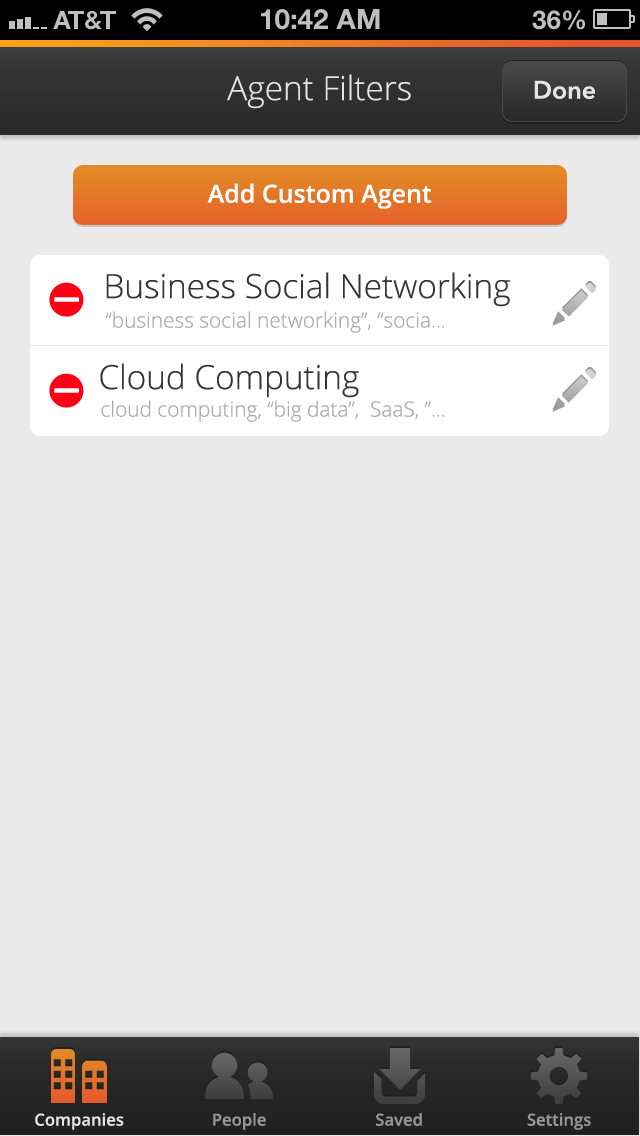
<style>
.page{position:relative;width:640px;height:1136px;background:#eaeaea}
.page>*{position:absolute;margin:0}
.t1{font:33.3px "OpenSans-Light";color:#e5e5e5}
.t2{font:25px "AvenirNext-DemiBold";color:#e5e5e5}
.t3{font:25px "OpenSans-Semibold";color:#ffffff}
.t4{font:33.3px "OpenSans-Light";color:#343434}
.t5{font:20.8px "OpenSans-Light";color:#aaaaaa}
.t6{font:16.7px "OpenSans-Semibold";color:#e5e5e5}
.t7{font:16.7px "OpenSans-Semibold";color:#969696}
</style>
<div class="page">
<p class="t1" style="left:227px;top:74px;width:184px;height:35px">Agent Filters</p>
<p class="t2" style="left:534px;top:80px;width:61px;height:19px">Done</p>
<p class="t3" style="left:207px;top:183px;width:225px;height:26px">Add Custom Agent</p>
<p class="t4" style="left:106px;top:272px;width:404px;height:35px">Business Social Networking</p>
<p class="t5" style="left:105px;top:311px;width:340px;height:22px">“business social networking”, “socia...</p>
<p class="t4" style="left:100px;top:363px;width:259px;height:35px">Cloud Computing</p>
<p class="t5" style="left:101px;top:400px;width:344px;height:22px">cloud computing, “big data”,  SaaS, ”...</p>
<p class="t6" style="left:35px;top:1113px;width:89px;height:17px">Companies</p>
<p class="t7" style="left:213px;top:1113px;width:53px;height:17px">People</p>
<p class="t7" style="left:376px;top:1113px;width:46px;height:13px">Saved</p>
<p class="t7" style="left:527px;top:1113px;width:64px;height:17px">Settings</p>
</div>
